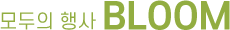
<style>
.page{position:relative;width:230px;height:30px;background:#ffffff}
.page>*{position:absolute;margin:0}
.t1{font:36px "S-CoreDream-6Bold";color:#92ad41;text-transform:uppercase}
.t2{font:19px "S-CoreDream-4Regular";color:#92ad41;text-transform:uppercase}
</style>
<div class="page">
<p class="t1" style="left:104px;top:0px;width:126px;height:30px">BLOOM</p>
<p class="t2" style="left:0px;top:11px;width:96px;height:19px">모두의 행사</p>
</div>
